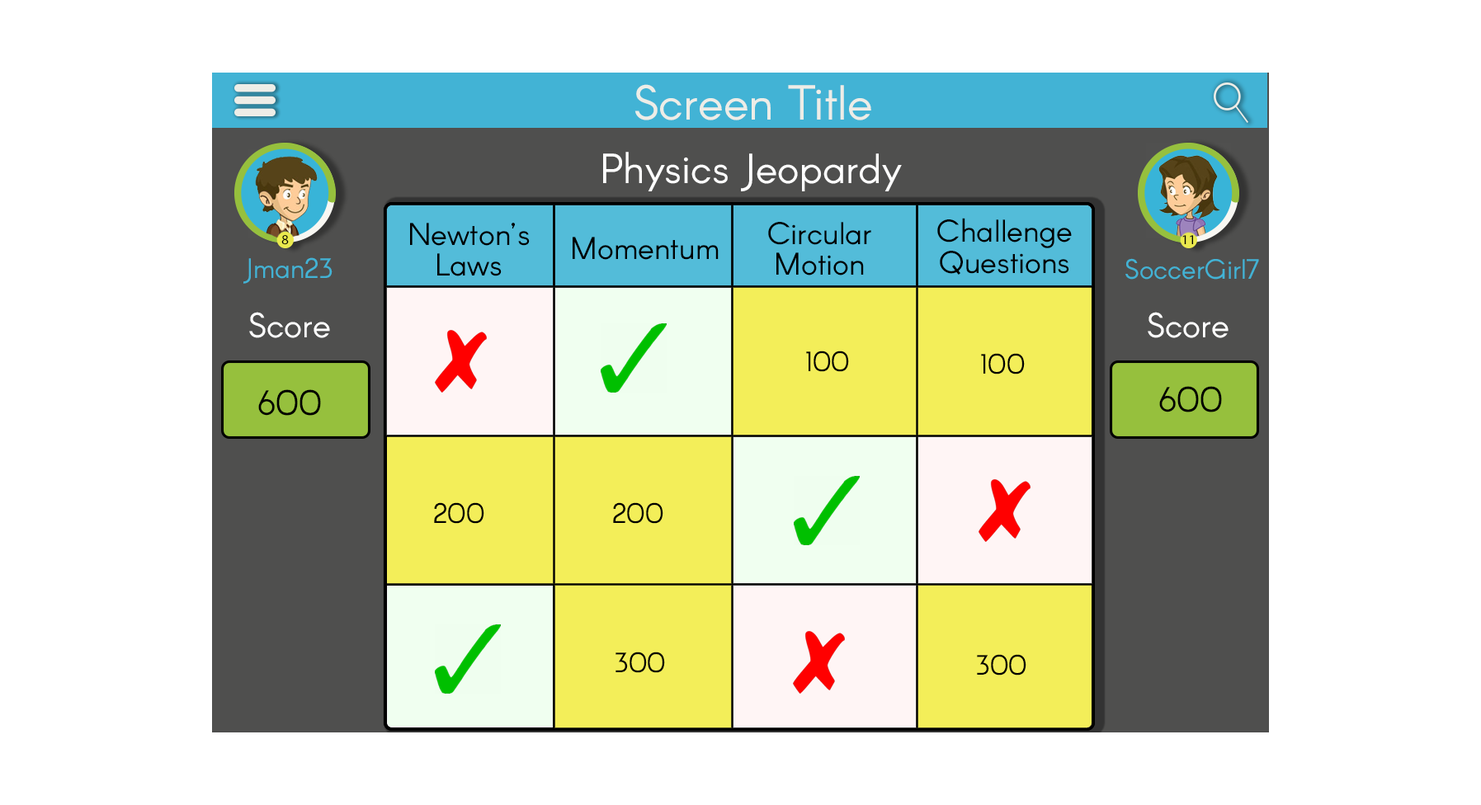
<style>
.page{position:relative;width:1481px;height:805px;background:#ffffff}
.page>*{position:absolute;margin:0}
.t1{font:48.1px "Arcon-Regular";color:#edede7}
.t2{font:41.3px "Arcon-Regular";color:#ffffff}
.t3{font:30.9px/30.9px "Arcon-Regular";color:#000000}
.t4{font:13.8px "MyriadPro-Regular";color:#000000}
.t5{font:30.9px "Arcon-Regular";color:#000000}
.t6{font:27.5px "Arcon-Regular";color:#42b3d5}
.t7{font:34.4px "Arcon-Regular";color:#ffffff}
.t8{font:27.5px "Arcon-Regular";color:#000000}
.t9{font:34.4px "Arcon-Regular";color:#000000}
</style>
<div class="page">
<p class="t1" style="left:634px;top:84px;width:237px;height:36px">Screen Title</p>
<p class="t2" style="left:603px;top:152px;width:299px;height:39px">Physics Jeopardy</p>
<p class="t3" style="left:768px;top:222px;width:103px;height:54px;text-align:center">Circular<br>Motion</p>
<p class="t3" style="left:937px;top:218px;width:135px;height:57px;text-align:center">Challenge<br>Questions</p>
<p class="t3" style="left:410px;top:223px;width:120px;height:53px;text-align:center">Newton’s<br>Laws</p>
<p class="t4" style="left:281px;top:235px;width:8px;height:10px">8</p>
<p class="t5" style="left:573px;top:237px;width:146px;height:23px">Momentum</p>
<p class="t4" style="left:1182px;top:235px;width:11px;height:9px">11</p>
<p class="t6" style="left:243px;top:257px;width:89px;height:27px">Jman23</p>
<p class="t6" style="left:1125px;top:258px;width:134px;height:22px">SoccerGirl7</p>
<p class="t7" style="left:249px;top:312px;width:81px;height:26px">Score</p>
<p class="t7" style="left:1148px;top:312px;width:80px;height:26px">Score</p>
<p class="t8" style="left:806px;top:351px;width:43px;height:21px">100</p>
<p class="t8" style="left:981px;top:353px;width:44px;height:22px">100</p>
<p class="t9" style="left:258px;top:389px;width:63px;height:27px">600</p>
<p class="t9" style="left:1159px;top:386px;width:63px;height:27px">600</p>
<p class="t8" style="left:434px;top:502px;width:50px;height:22px">200</p>
<p class="t8" style="left:613px;top:502px;width:50px;height:22px">200</p>
<p class="t8" style="left:615px;top:652px;width:50px;height:21px">300</p>
<p class="t8" style="left:977px;top:654px;width:49px;height:22px">300</p>
</div>
